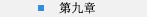
<style>
.page{position:relative;width:147px;height:17px;background:#f1f1f1}
.page>*{position:absolute;margin:0}
.t1{font:12px "SimSun";color:#000000;font-weight:bold}
</style>
<div class="page">
<p class="t1" style="left:39px;top:0px;width:77px;height:17px">第九章</p>
</div>
